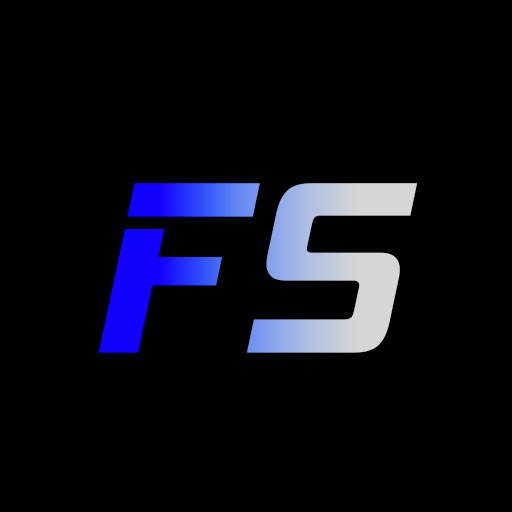
<style>
.page{position:relative;width:512px;height:512px;background:#000000}
.page>*{position:absolute;margin:0}
.t1{font:250px "HemiHeadRg-BoldItalic"}
</style>
<div class="page">
<p class="t1" style="left:98px;top:183px;width:319px;height:170px">FS</p>
</div>
